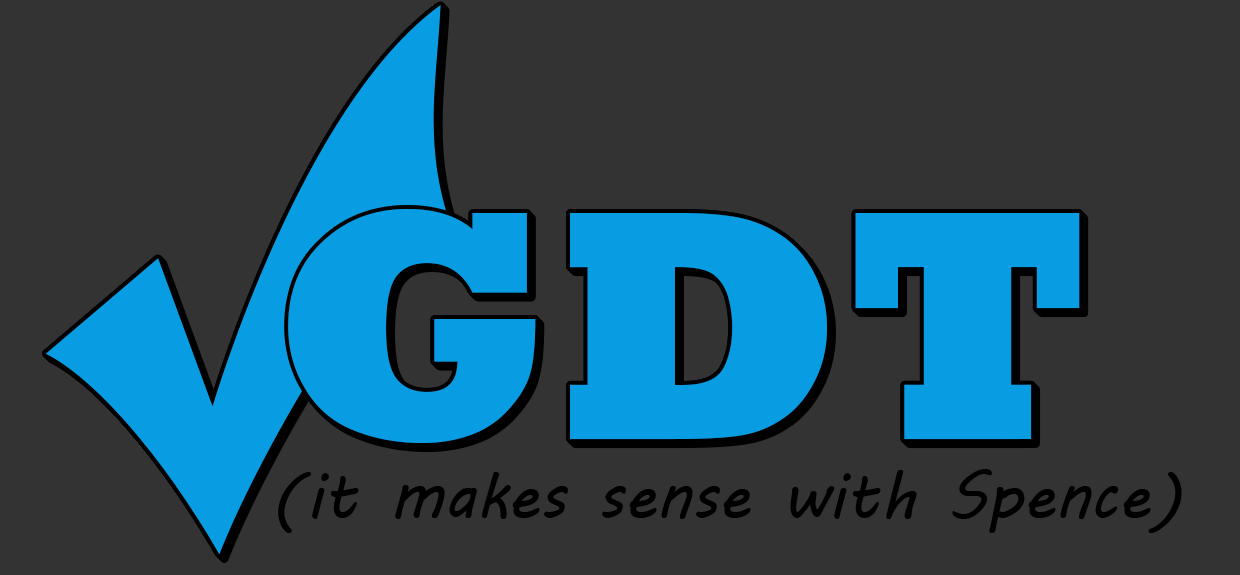
<style>
.page{position:relative;width:1240px;height:575px;background:#333333}
.page>*{position:absolute;margin:0}
.t1{font:64.6px "MVBoli";color:#000000}
</style>
<div class="page">
<p class="t1" style="left:278px;top:469px;width:904px;height:64px">(it makes sense with Spence)</p>
</div>
